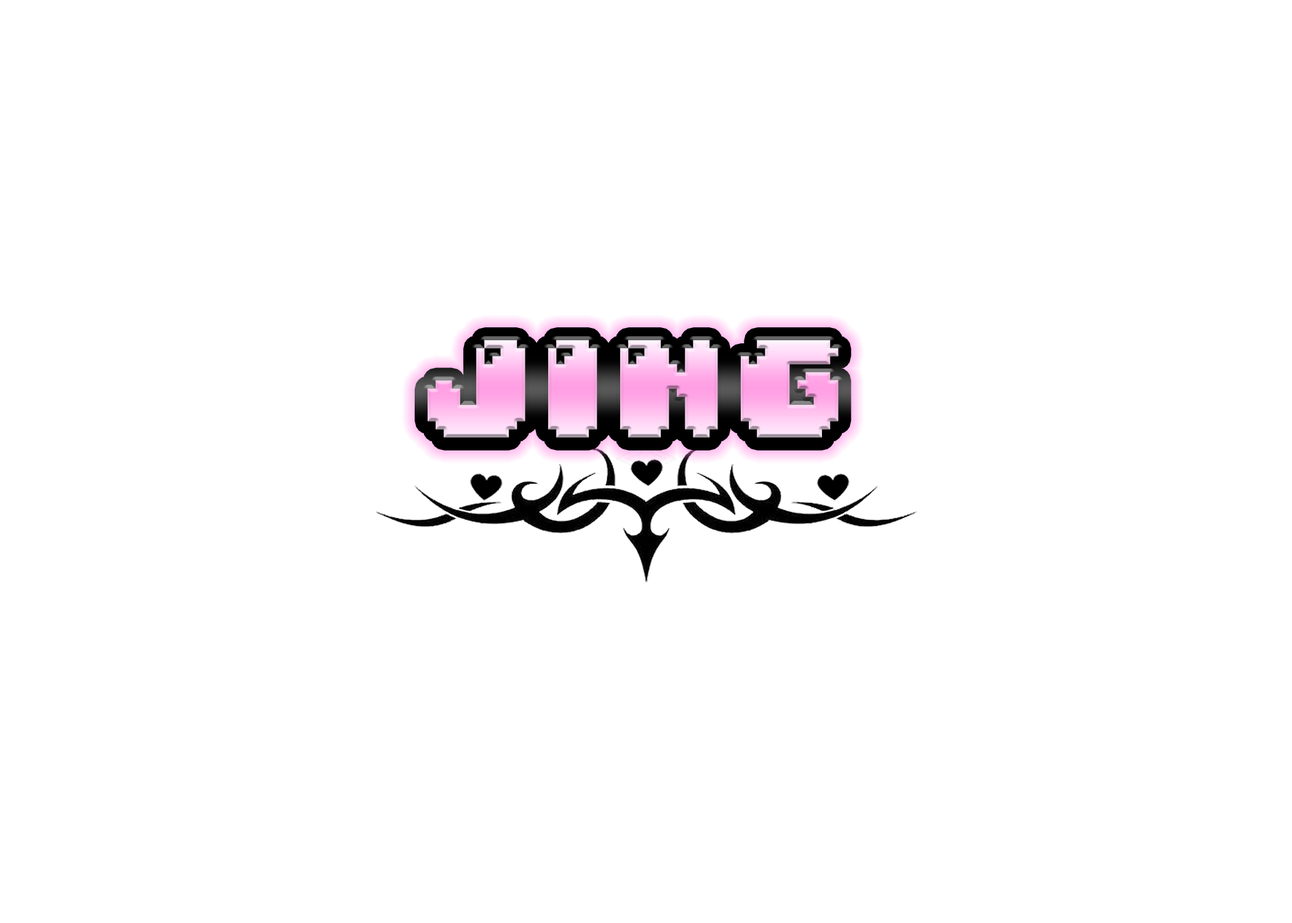
<style>
.page{position:relative;width:1292px;height:923px;background:#ffffff}
.page>*{position:absolute;margin:0}
.t1{font:138px "04b30";letter-spacing:0.05em}
</style>
<div class="page">
<p class="t1" style="left:428px;top:340px;width:411px;height:97px">jing</p>
</div>
